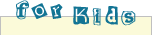
<style>
.page{position:relative;width:152px;height:35px;background:#fbfad9}
.page>*{position:absolute;margin:0}
.t1{font:24px "Cut-n-Paste";letter-spacing:0.02em;color:#127494;font-weight:bold}
</style>
<div class="page">
<p class="t1" style="left:16px;top:0px;width:47px;height:20px">for</p>
<p class="t1" style="left:73px;top:6px;width:63px;height:20px">Kids</p>
</div>
